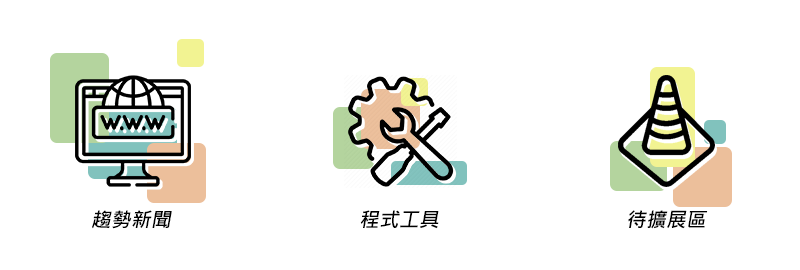
<style>
.page{position:relative;width:800px;height:270px;background:#ffffff}
.page>*{position:absolute;margin:0}
.t1{font:20px "MicrosoftJhengHeiBold";color:#000000;font-style:italic}
</style>
<div class="page">
<p class="t1" style="left:92px;top:210px;width:80px;height:19px">趨勢新聞</p>
<p class="t1" style="left:360px;top:210px;width:79px;height:19px">程式工具</p>
<p class="t1" style="left:628px;top:210px;width:80px;height:19px">待擴展區</p>
</div>
